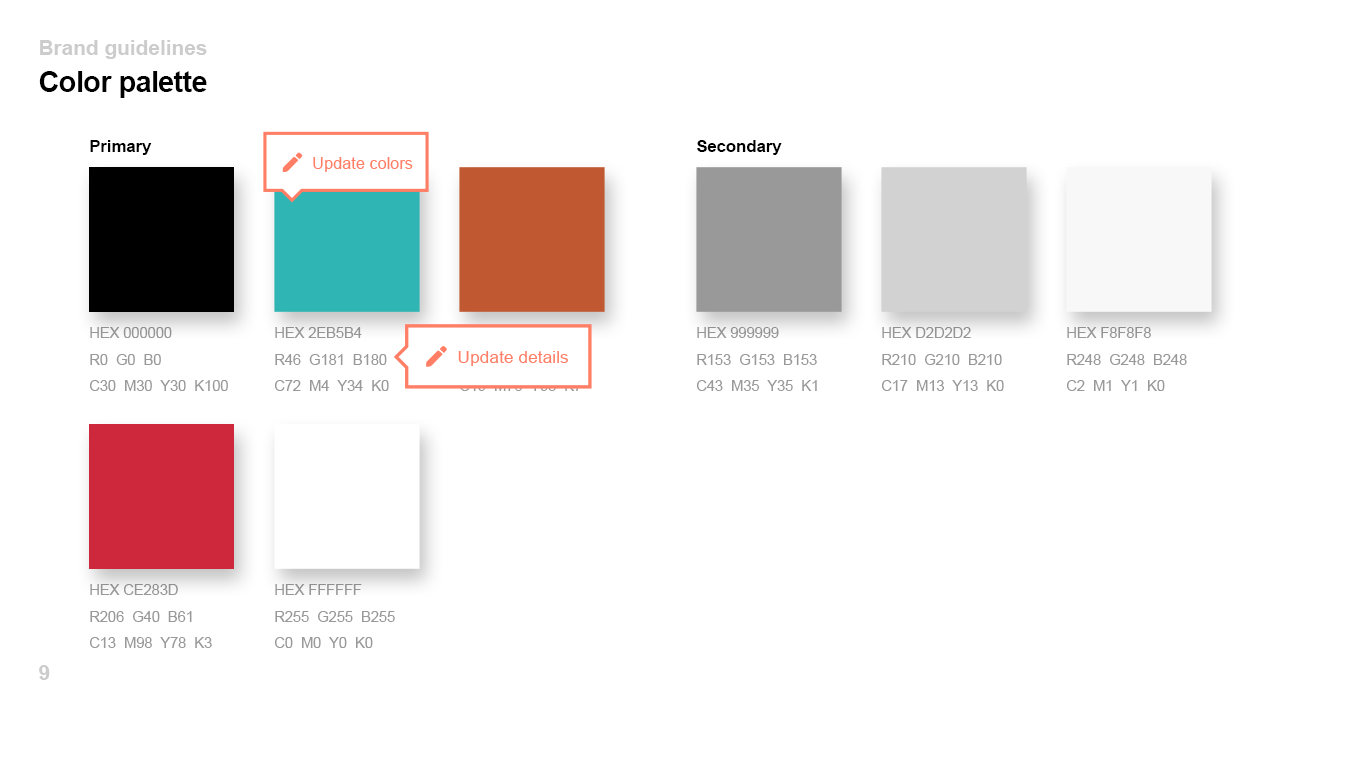
<style>
.page{position:relative;width:1366px;height:768px;background:#ffffff}
.page>*{position:absolute;margin:0}
.t1{font:20.8px "Arial-BoldMT";color:#cccccc}
.t2{font:29.2px "Arial-BoldMT";letter-spacing:-0.025em;color:#000000}
.t3{font:16.7px "Arial-BoldMT";color:#000000}
.t4{font:14.6px/26.2px "ArialMT";color:#999999}
</style>
<div class="page">
<p class="t1" style="left:40px;top:40px;width:167px;height:19px">Brand guidelines</p>
<p class="t2" style="left:39px;top:71px;width:168px;height:27px">Color palette</p>
<p class="t3" style="left:90px;top:140px;width:62px;height:15px">Primary</p>
<p class="t3" style="left:697px;top:140px;width:85px;height:15px">Secondary</p>
<p class="t4" style="left:90px;top:327px;width:138px;height:64px">HEX 000000<br>R0  G0  B0<br>C30  M30  Y30  K100</p>
<p class="t4" style="left:275px;top:327px;width:114px;height:64px">HEX 2EB5B4<br>R46  G181  B180<br>C72  M4  Y34  K0</p>
<p class="t4" style="left:697px;top:327px;width:120px;height:64px">HEX 999999<br>R153  G153  B153<br>C43  M35  Y35  K1</p>
<p class="t4" style="left:882px;top:327px;width:122px;height:64px">HEX D2D2D2<br>R210  G210  B210<br>C17  M13  Y13  K0</p>
<p class="t4" style="left:1067px;top:327px;width:120px;height:64px">HEX F8F8F8<br>R248  G248  B248<br>C2  M1  Y1  K0</p>
<p class="t4" style="left:90px;top:584px;width:122px;height:64px">HEX CE283D<br>R206  G40  B61<br>C13  M98  Y78  K3</p>
<p class="t4" style="left:275px;top:584px;width:120px;height:64px">HEX FFFFFF<br>R255  G255  B255<br>C0  M0  Y0  K0</p>
<p class="t1" style="left:39px;top:665px;width:11px;height:15px">9</p>
</div>
